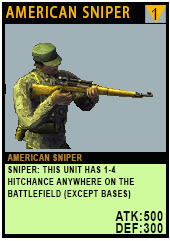
<style>
.page{position:relative;width:170px;height:241px;background:#a0b2b8}
.page>*{position:absolute;margin:0}
.t1{font:15.1px "AdobeHeitiStd-Regular";letter-spacing:0.08em;color:#ffb800;text-transform:uppercase;scale:0.86 1}
.t2{font:17.4px "ArialMT";letter-spacing:0.08em;color:#000000;text-transform:uppercase;scale:0.86 1}
.t3{font:9.3px/12px "Arial-BoldMT";letter-spacing:0.08em;color:#020100;text-transform:uppercase;scale:0.76 1}
.t4{font:9.3px/20.2px "Arial-BoldMT";letter-spacing:0.08em;color:#b4832c;text-transform:uppercase;scale:0.76 1}
.t5{font:13.9px/12px "Arial-BoldMT";letter-spacing:0.08em;color:#050606;text-transform:uppercase;scale:0.76 1}
</style>
<div class="page">
<p class="t1" style="left:6px;top:6px;width:124px;height:12px">American Sniper</p>
<p class="t2" style="left:152px;top:8px;width:5px;height:12px">1</p>
<p class="t3" style="left:7px;top:154px;width:156px;height:79px"><span class="t4">American Sniper<br></span>Sniper: this unit has 1-4 hitchance anywhere on the battlefield (except bases)<br><br><span class="t5">atk:500<br>def:300</span></p>
</div>
